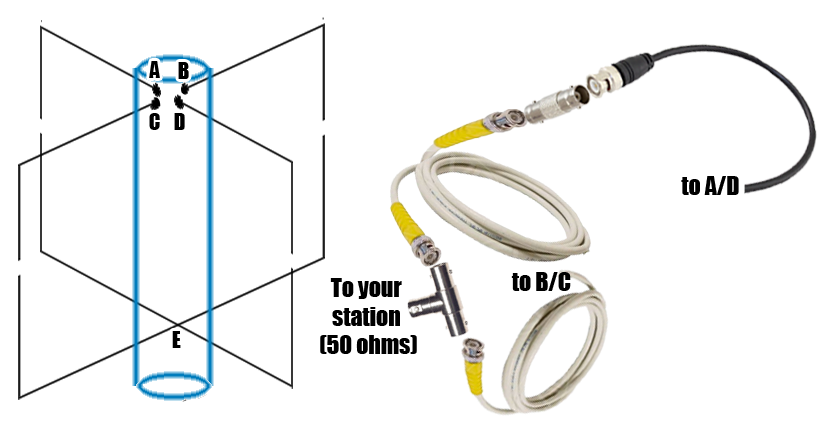
<style>
.page{position:relative;width:827px;height:433px;background:#ffffff}
.page>*{position:absolute;margin:0}
.t1{font:20.9px "Impact";color:#000000}
.t2{font:23.7px "Impact";color:#000000}
</style>
<div class="page">
<p class="t1" style="left:149px;top:61px;width:11px;height:17px">A</p>
<p class="t1" style="left:178px;top:62px;width:11px;height:17px">B</p>
<p class="t1" style="left:149px;top:113px;width:11px;height:17px">C</p>
<p class="t1" style="left:174px;top:113px;width:11px;height:17px">D</p>
<p class="t2" style="left:681px;top:176px;width:58px;height:19px">to A/D</p>
<p class="t2" style="left:320px;top:278px;width:97px;height:76px;text-align:center">To your<br>station<br> (50 ohms)</p>
<p class="t2" style="left:511px;top:272px;width:60px;height:19px">to B/C</p>
<p class="t1" style="left:172px;top:331px;width:9px;height:17px">E</p>
</div>
